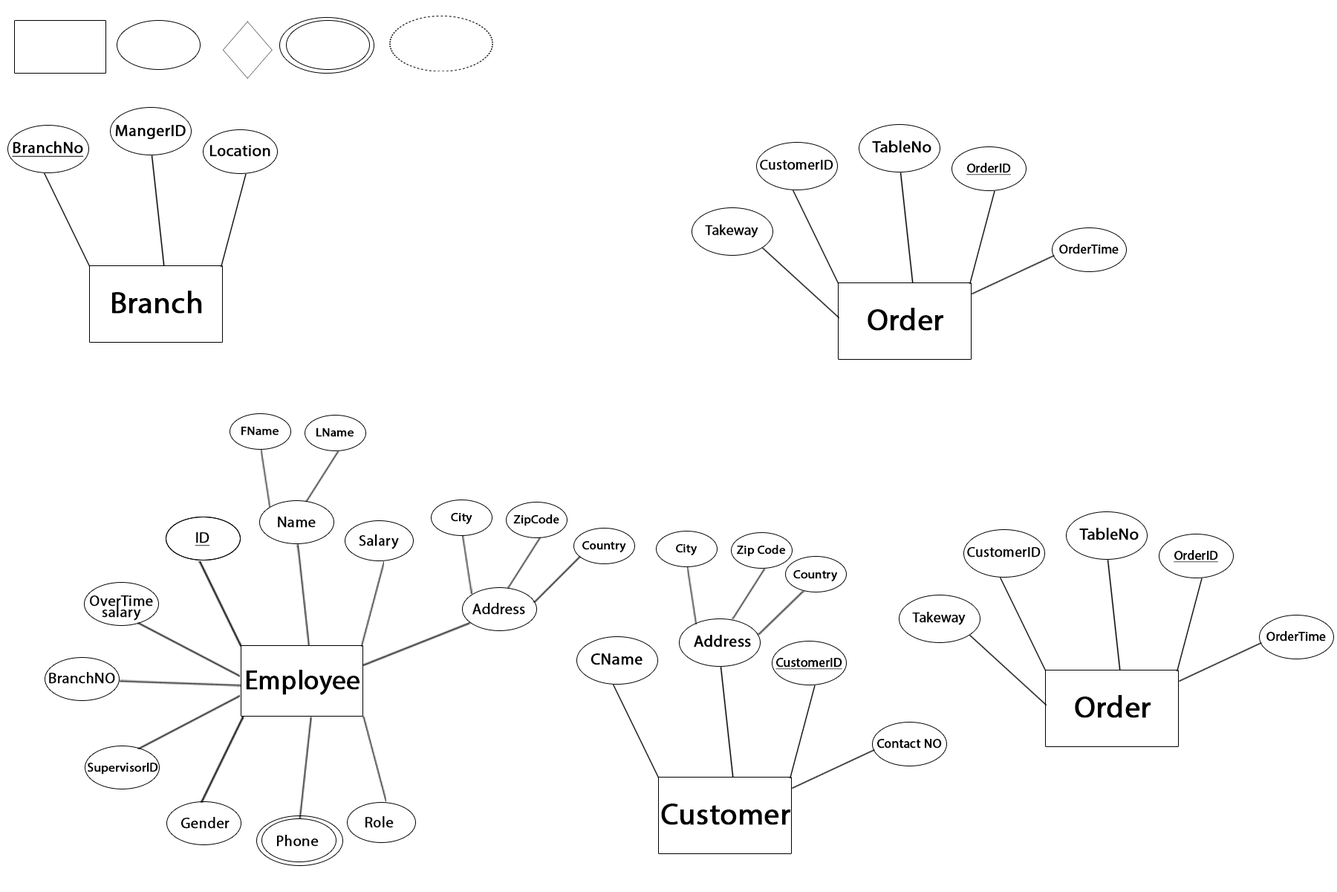
<style>
.page{position:relative;width:1337px;height:892px;background:#ffffff}
.page>*{position:absolute;margin:0}
.t1{font:16.4px "MyriadPro-Regular";color:#000000;font-weight:bold}
.t2{font:16.4px "MyriadPro-Regular";color:#000000;font-weight:bold;text-decoration:underline}
.t3{font:16.3px "MyriadPro-Regular";color:#000000;font-weight:bold}
.t4{font:14.1px "MyriadPro-Regular";color:#000000;font-weight:bold}
.t5{font:12.7px "MyriadPro-Regular";color:#000000;font-weight:bold;text-decoration:underline}
.t6{font:12.7px "MyriadPro-Regular";color:#000000;font-weight:bold}
.t7{font:30.6px "MyriadPro-Regular";color:#000000;font-weight:bold}
.t8{font:12.2px "MyriadPro-Regular";color:#000000;font-weight:bold}
.t9{font:15px "MyriadPro-Regular";color:#000000;font-weight:bold}
.t10{font:15px "MyriadPro-Regular";color:#000000;font-weight:bold;text-decoration:underline}
.t11{font:15px/11.3px "MyriadPro-Regular";color:#000000;font-weight:bold}
.t12{font:26.6px "MyriadPro-Regular";color:#000000;font-weight:bold}
.t13{font:12.4px "MyriadPro-Regular";color:#000000;font-weight:bold}
</style>
<div class="page">
<p class="t1" style="left:115px;top:125px;width:71px;height:15px">MangerID</p>
<p class="t2" style="left:12px;top:141px;width:72px;height:16px">BranchNo</p>
<p class="t3" style="left:210px;top:145px;width:60px;height:12px">Location</p>
<p class="t1" style="left:872px;top:140px;width:60px;height:13px">TableNo</p>
<p class="t4" style="left:760px;top:160px;width:74px;height:10px">CustomerID</p>
<p class="t5" style="left:967px;top:163px;width:44px;height:12px">OrderID</p>
<p class="t4" style="left:705px;top:224px;width:54px;height:14px">Takeway</p>
<p class="t6" style="left:1060px;top:244px;width:59px;height:10px">OrderTime</p>
<p class="t7" style="left:112px;top:291px;width:90px;height:23px">Branch</p>
<p class="t7" style="left:868px;top:308px;width:76px;height:23px">Order</p>
<p class="t8" style="left:241px;top:426px;width:38px;height:9px">FName</p>
<p class="t8" style="left:317px;top:428px;width:37px;height:9px">LName</p>
<p class="t9" style="left:278px;top:516px;width:38px;height:12px">Name</p>
<p class="t8" style="left:451px;top:513px;width:22px;height:12px">City</p>
<p class="t8" style="left:513px;top:514px;width:46px;height:12px">ZipCode</p>
<p class="t10" style="left:195px;top:532px;width:15px;height:14px">ID</p>
<p class="t1" style="left:1080px;top:528px;width:59px;height:12px">TableNo</p>
<p class="t9" style="left:359px;top:534px;width:40px;height:15px">Salary</p>
<p class="t8" style="left:583px;top:541px;width:43px;height:12px">Country</p>
<p class="t8" style="left:676px;top:544px;width:22px;height:12px">City</p>
<p class="t8" style="left:737px;top:545px;width:49px;height:12px">Zip Code</p>
<p class="t4" style="left:967px;top:547px;width:74px;height:10px">CustomerID</p>
<p class="t5" style="left:1174px;top:550px;width:45px;height:12px">OrderID</p>
<p class="t8" style="left:794px;top:570px;width:44px;height:12px">Country</p>
<p class="t11" style="left:90px;top:595px;width:63px;height:25px;text-align:center">OverTime<br>salary</p>
<p class="t9" style="left:473px;top:603px;width:52px;height:11px">Address</p>
<p class="t4" style="left:912px;top:611px;width:54px;height:14px">Takeway</p>
<p class="t1" style="left:694px;top:635px;width:57px;height:12px">Address</p>
<p class="t6" style="left:1267px;top:631px;width:59px;height:10px">OrderTime</p>
<p class="t1" style="left:591px;top:653px;width:52px;height:12px">CName</p>
<p class="t5" style="left:776px;top:658px;width:67px;height:11px">CustomerID</p>
<p class="t9" style="left:49px;top:672px;width:66px;height:12px">BranchNO</p>
<p class="t12" style="left:246px;top:669px;width:114px;height:26px">Employee</p>
<p class="t7" style="left:1075px;top:695px;width:76px;height:23px">Order</p>
<p class="t6" style="left:877px;top:739px;width:65px;height:9px">Contact NO</p>
<p class="t13" style="left:88px;top:762px;width:70px;height:12px">SupervisorID</p>
<p class="t7" style="left:661px;top:803px;width:130px;height:22px">Customer</p>
<p class="t9" style="left:181px;top:817px;width:49px;height:11px">Gender</p>
<p class="t9" style="left:366px;top:816px;width:28px;height:12px">Role</p>
<p class="t9" style="left:277px;top:834px;width:42px;height:12px">Phone</p>
</div>
